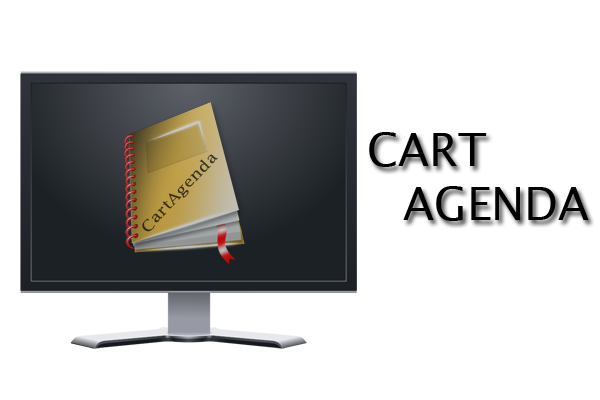
<style>
.page{position:relative;width:600px;height:400px;background:#ffffff}
.page>*{position:absolute;margin:0}
.t1{font:45px "LucidaSans";color:#000000}
.t2{font:14.8px "LucidaFax";color:#393017;scale:1.19 1}
</style>
<div class="page">
<p class="t1" style="left:369px;top:132px;width:220px;height:89px">CART<br> AGENDA</p>
<p class="t2" style="left:142px;top:154px;width:76px;height:78px;rotate:-47deg">CartAgenda</p>
</div>
